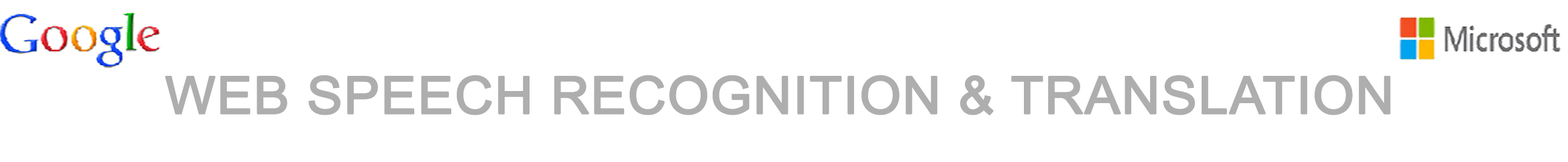
<style>
.page{position:relative;width:1568px;height:162px;background:#ffffff}
.page>*{position:absolute;margin:0}
.t1{font:51.6px "ArialMT";color:#aeaeaf;font-weight:bold;scale:1.03 1}
.t2{font:37.9px "ArialMT";color:#aeaeaf;font-weight:bold;scale:1.03 1}
</style>
<div class="page">
<p class="t1" style="left:165px;top:75px;width:1226px;height:41px"><span class="t2"><br> </span>WEB SPEECH RECOGNITION &amp; TRANSLATION</p>
</div>
